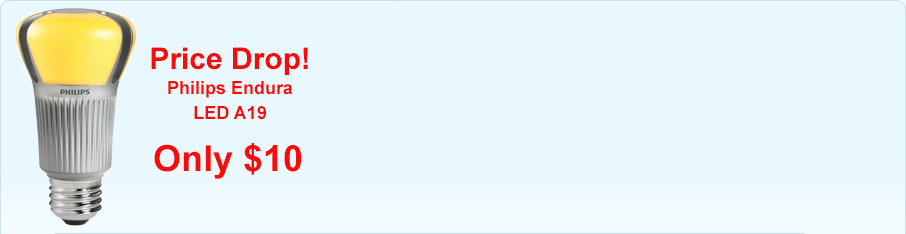
<style>
.page{position:relative;width:906px;height:234px;background:#e9f8fd}
.page>*{position:absolute;margin:0}
.t1{font:18px/25px "Arial-BoldMT";color:#fb0a0a}
.t2{font:30px "Arial-BoldMT";color:#fb0a0a}
.t3{font:36px "Arial-BoldMT";color:#fb0a0a}
</style>
<div class="page">
<p class="t1" style="left:151px;top:47px;width:157px;height:73px;text-align:center"><span class="t2">Price Drop!<br></span>Philips Endura<br>LED A19</p>
<p class="t3" style="left:154px;top:143px;width:148px;height:36px">Only $10</p>
</div>
